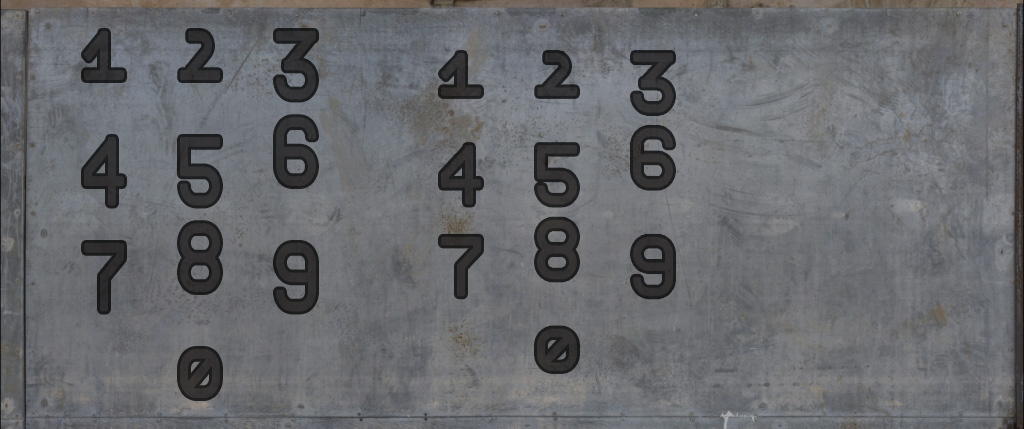
<style>
.page{position:relative;width:1024px;height:429px}
.page>*{position:absolute;margin:0}
.t1{font:88.2px "Telegrama-RenderOsN";color:#403835;scale:0.82 1}
</style>
<div class="page">
<p class="t1" style="left:84px;top:31px;width:232px;height:367px;text-align:center;opacity:0.75">1 2 3<br>4 5 6<br>7 8 9<br>0</p>
</div>
